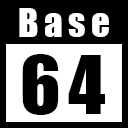
<style>
.page{position:relative;width:128px;height:128px;background:#000002}
.page>*{position:absolute;margin:0}
.t1{font:37px "Impact";letter-spacing:0.15em;color:#ffffff}
.t2{font:75px "Impact";letter-spacing:0.1em;color:#000002}
</style>
<div class="page">
<p class="t1" style="left:19px;top:8px;width:90px;height:29px">Base</p>
<p class="t2" style="left:22px;top:54px;width:83px;height:61px">64</p>
</div>
